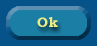
<style>
.page{position:relative;width:97px;height:46px;background:#065389}
.page>*{position:absolute;margin:0}
.t1{font:14px "BookmanOldStyle-Bold";color:#edec86}
</style>
<div class="page">
<p class="t1" style="left:37px;top:17px;width:21px;height:10px">Ok</p>
</div>
